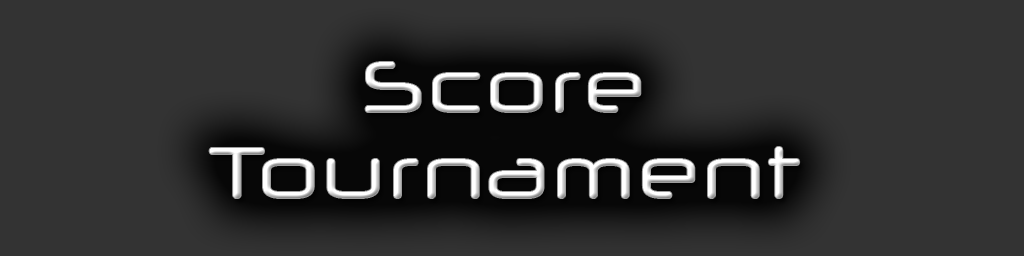
<style>
.page{position:relative;width:1024px;height:256px;background:#333333}
.page>*{position:absolute;margin:0}
.t1{font:72px "NeuropolXFree";color:#ffffff}
</style>
<div class="page">
<p class="t1" style="left:209px;top:62px;width:591px;height:136px;text-align:center">Score<br>Tournament</p>
</div>
